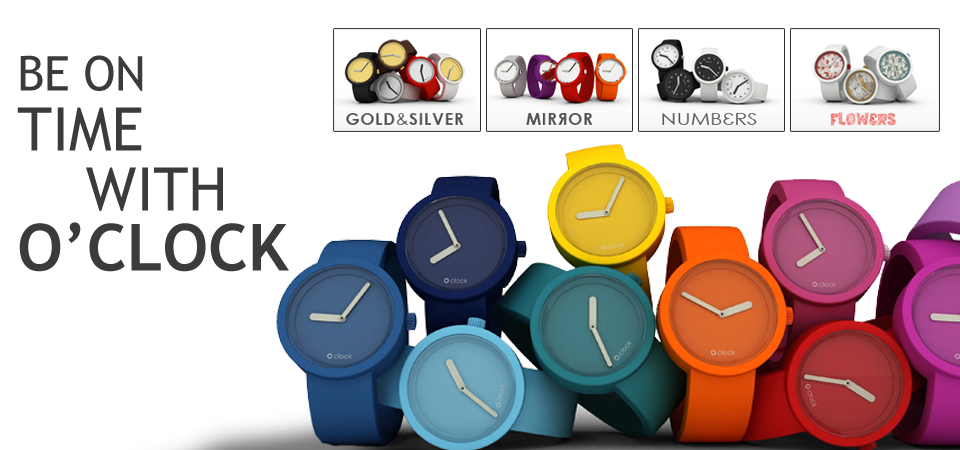
<style>
.page{position:relative;width:960px;height:450px;background:#ffffff}
.page>*{position:absolute;margin:0}
.t1{font:60px/60px "TrebuchetMS";color:#3b3b3b}
.t2{font:48px/60px "TrebuchetMS";letter-spacing:-0.01em;color:#3b3b3b}
.t3{font:65px/60px "TrebuchetMS-Bold";color:#3b3b3b}
</style>
<div class="page">
<p class="t1" style="left:17px;top:55px;width:272px;height:217px"><span class="t2">BE ON <br></span>TIME <br> WITH<br><span class="t3">O’CLOCK</span></p>
</div>
